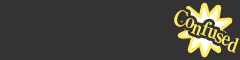
<style>
.page{position:relative;width:240px;height:60px;background:#333333}
.page>*{position:absolute;margin:0}
.t1{font:19.8px "RyuminPro-ExBold";letter-spacing:-0.08em;color:#ffeb5c;scale:0.9 1}
.t2{font:22px "RyuminPro-ExBold";letter-spacing:-0.08em;color:#ffeb5c;scale:0.9 1}
</style>
<div class="page">
<p class="t1" style="left:174px;top:10px;width:65px;height:43px;rotate:20deg"><span class="t2">C</span>onfused</p>
</div>
